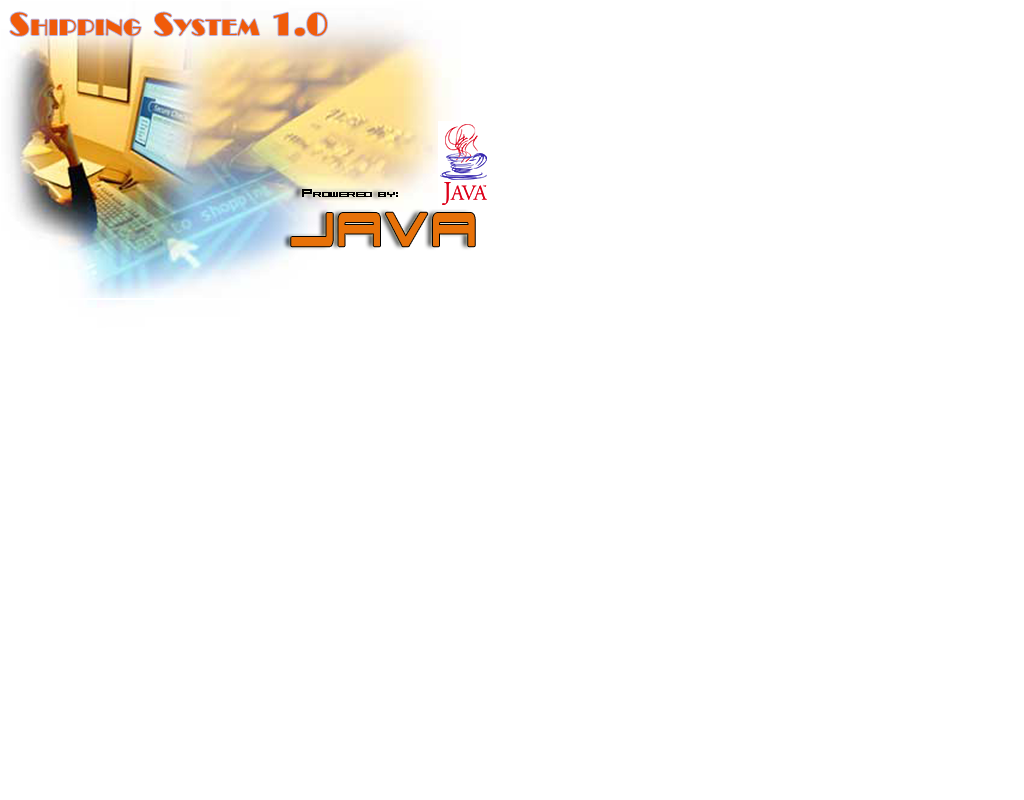
<style>
.page{position:relative;width:1024px;height:800px;background:#ffffff}
.page>*{position:absolute;margin:0}
.t1{font:30px "BroadwayBT-Regular";letter-spacing:0.025em;color:#f05b0a;font-variant:small-caps;font-weight:bold}
.t2{font:14px "911PorschaCondensed";letter-spacing:0.025em;color:#000000;font-variant:small-caps;font-weight:bold}
.t3{font:60px "911PorschaCondensed";letter-spacing:0.025em;color:#e77108;font-variant:small-caps;font-weight:bold}
</style>
<div class="page">
<p class="t1" style="left:10px;top:12px;width:317px;height:24px">Shipping System 1.0</p>
<p class="t2" style="left:302px;top:189px;width:96px;height:8px">Prowered by:</p>
<p class="t3" style="left:291px;top:212px;width:184px;height:35px">JAVA</p>
</div>
